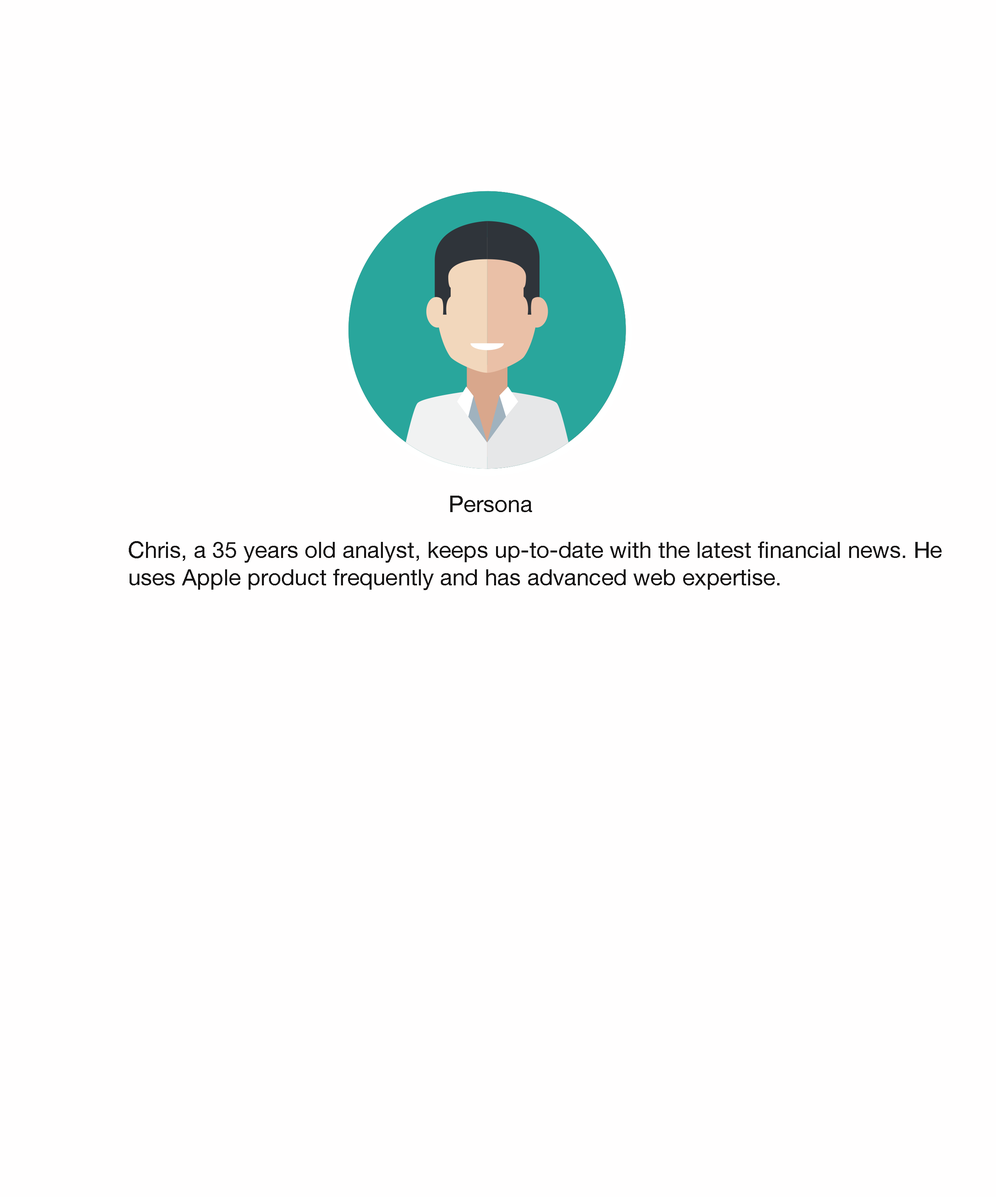
<style>
.page{position:relative;width:996px;height:1197px;background:#fffefe}
.page>*{position:absolute;margin:0}
.t1{font:22.7px "HelveticaNeue";color:#161414}
</style>
<div class="page">
<p class="t1" style="left:450px;top:495px;width:82px;height:17px">Persona</p>
<p class="t1" style="left:129px;top:541px;width:813px;height:49px">Chris, a 35 years old analyst, keeps up-to-date with the latest financial news. He <br>uses Apple product frequently and has advanced web expertise.</p>
</div>
